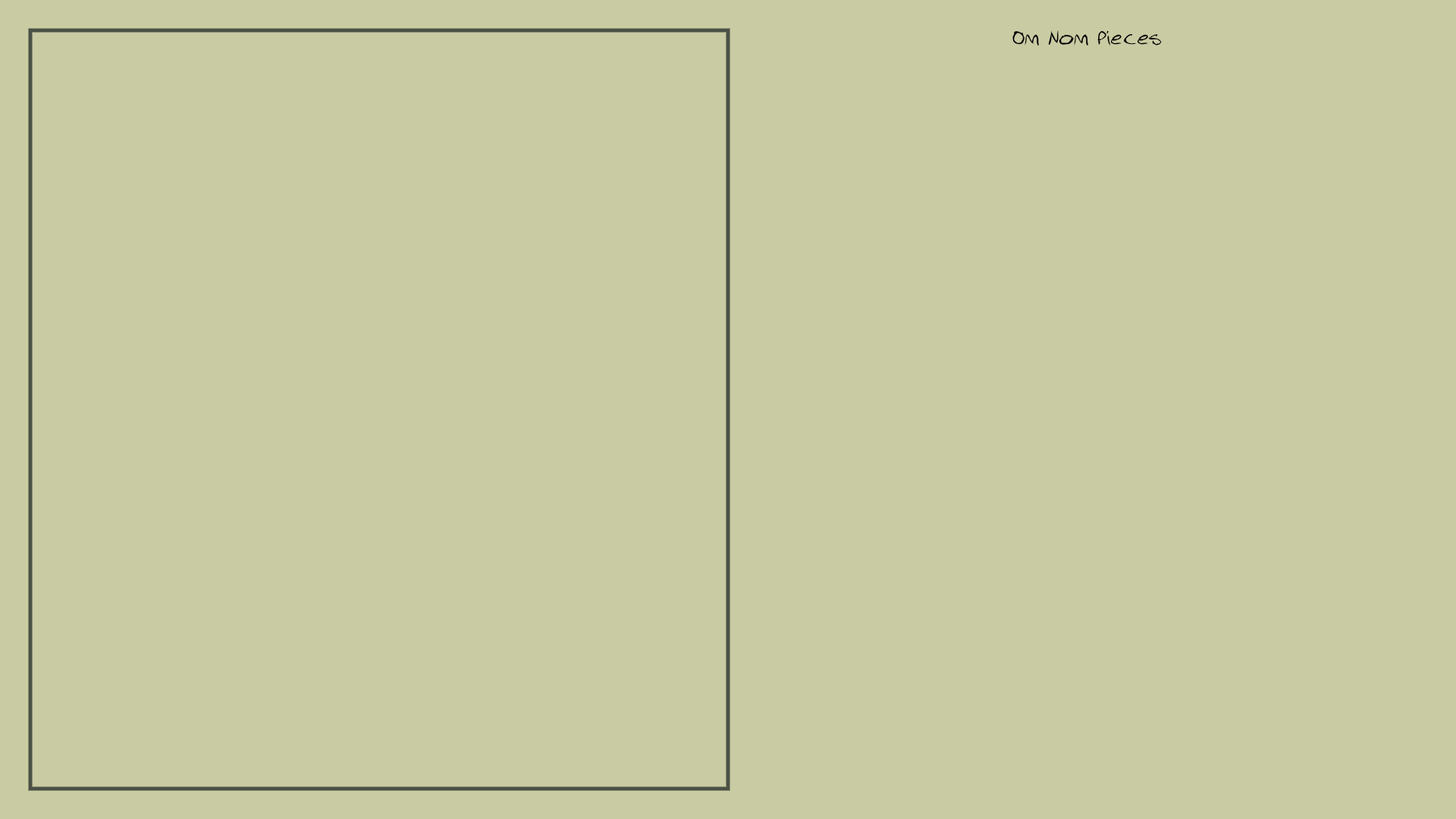
<style>
.page{position:relative;width:1456px;height:819px;background:#c9cba3}
.page>*{position:absolute;margin:0}
.t1{font:18.2px "2Dumb";color:#000000}
</style>
<div class="page">
<p class="t1" style="left:1012px;top:30px;width:150px;height:15px">Om Nom Pieces</p>
</div>
